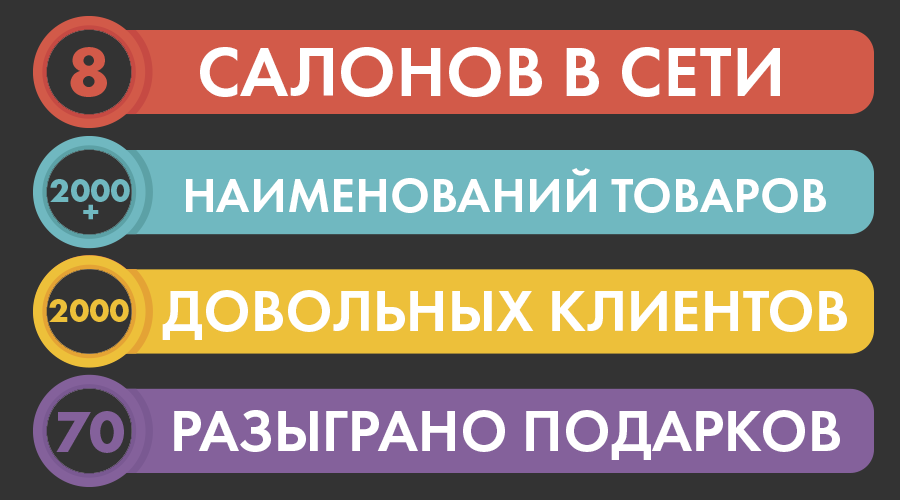
<style>
.page{position:relative;width:900px;height:500px;background:#333333}
.page>*{position:absolute;margin:0}
.t1{font:72px "FuturaPT-Bold";color:#d25a49;text-transform:uppercase}
.t2{font:72px "FuturaPT-Demi";color:#ffffff;text-transform:uppercase}
.t3{font:50px "FuturaPT-Demi";color:#ffffff;text-transform:uppercase}
.t4{font:34px/3.6px "FuturaPT-Bold";color:#70b8c0;text-transform:uppercase}
.t5{font:60px "FuturaPT-Demi";color:#ffffff;text-transform:uppercase}
.t6{font:34px "FuturaPT-Bold";color:#edc03a;text-transform:uppercase}
.t7{font:60px "FuturaPT-Bold";color:#84619b;text-transform:uppercase}
</style>
<div class="page">
<p class="t1" style="left:70px;top:47px;width:37px;height:50px">8</p>
<p class="t2" style="left:200px;top:47px;width:580px;height:50px">салонов в сети</p>
<p class="t3" style="left:186px;top:168px;width:640px;height:45px">наименований товаров</p>
<p class="t4" style="left:50px;top:179px;width:80px;height:41px;text-align:center">2000<br><br><br><br><br><br>+</p>
<p class="t5" style="left:162px;top:290px;width:685px;height:50px">довольных клиентов</p>
<p class="t6" style="left:49px;top:299px;width:80px;height:23px">2000</p>
<p class="t7" style="left:56px;top:411px;width:68px;height:42px">70</p>
<p class="t5" style="left:174px;top:410px;width:666px;height:50px">разыграно подарков</p>
</div>
